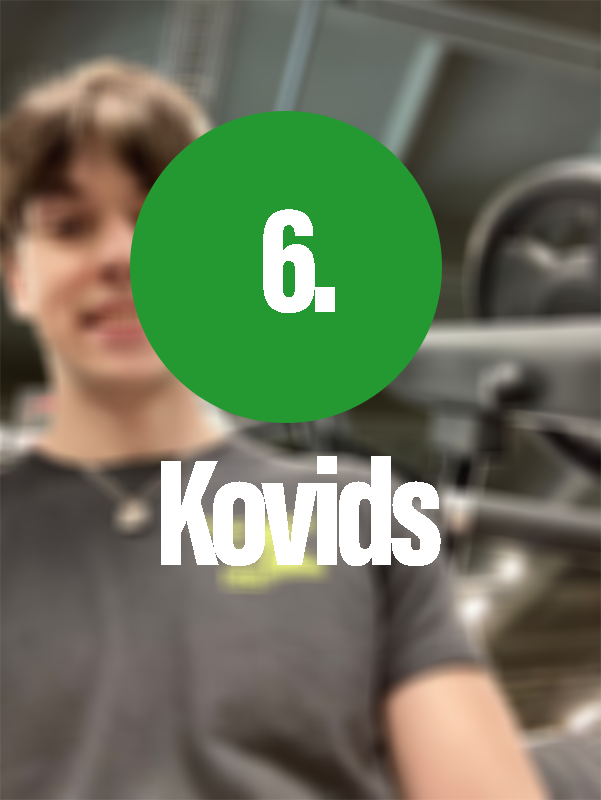
<style>
.page{position:relative;width:601px;height:800px}
.page>*{position:absolute;margin:0}
.t1{font:156.2px "AcuminConcept-ExtraCondensedBlack";letter-spacing:-0.05em;color:#ffffff}
</style>
<div class="page">
<p class="t1" style="left:263px;top:209px;width:72px;height:104px">6.</p>
<p class="t1" style="left:161px;top:456px;width:280px;height:110px">Kovids</p>
</div>
